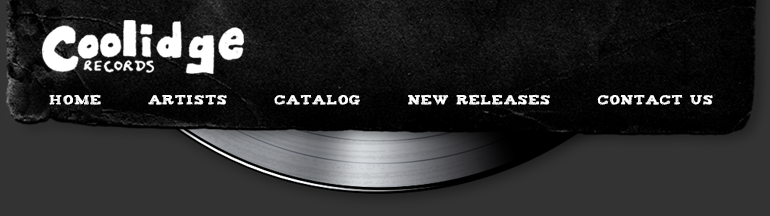
<style>
.page{position:relative;width:770px;height:216px;background:#333333}
.page>*{position:absolute;margin:0}
.t1{font:10.8px "Tiza";letter-spacing:0.109em;color:#ffffff}
</style>
<div class="page">
<p class="t1" style="left:49px;top:94px;width:664px;height:11px">HOME       ARTISTS       CATALOG       NEW RELEASES       CONTACT US</p>
</div>
